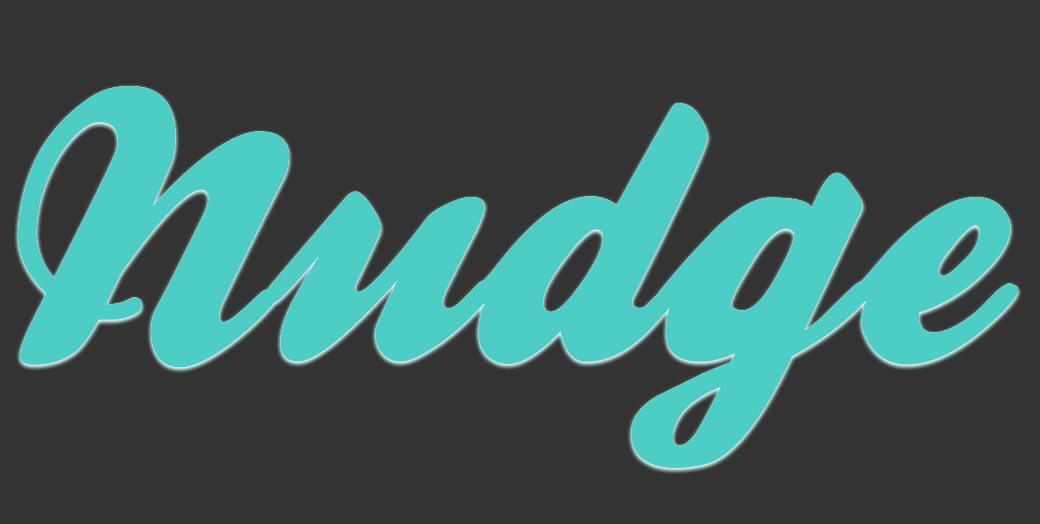
<style>
.page{position:relative;width:1040px;height:524px;background:#333333}
.page>*{position:absolute;margin:0}
.t1{font:397.7px "BallparkWeiner";color:#4ecdc4}
</style>
<div class="page">
<p class="t1" style="left:17px;top:86px;width:1002px;height:382px">Nudge</p>
<p class="t1" style="left:17px;top:86px;width:1002px;height:382px">Nudge</p>
</div>
